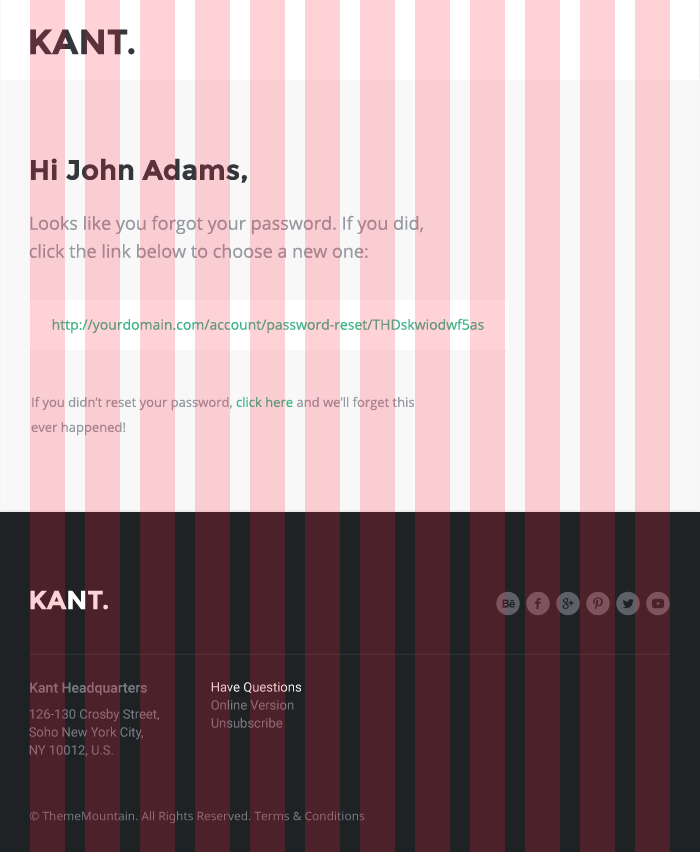
<style>
.page{position:relative;width:700px;height:852px;background:#f9cdd2}
.page>*{position:absolute;margin:0}
.t1{font:35px "Montserrat-Bold";color:#5c313a}
.t2{font:28px "Montserrat-Bold"}
.t3{font:18px/28px "OpenSans"}
.t4{font:14px "OpenSans"}
.t5{font:13px/25px "OpenSans"}
.t6{font:26px "Montserrat-Bold"}
.t7{font:14px "Roboto-Medium";color:#956a75}
.t8{font:13px/18px "Roboto-Regular"}
.t9{font:13px/18px "Roboto-Regular";color:#956a75}
.t10{font:12px "OpenSans";color:#956a75}
</style>
<div class="page">
<p class="t1" style="left:30px;top:29px;width:105px;height:26px">KANT.</p>
<p class="t2" style="left:31px;top:158px;width:216px;height:25px">Hi John Adams,</p>
<p class="t3" style="left:29px;top:215px;width:394px;height:43px">Looks like you forgot your password. If you did, <br>click the link below to choose a new one:</p>
<p class="t4" style="left:52px;top:318px;width:432px;height:16px">http://yourdomain.com/account/password-reset/THDskwiodwf5as</p>
<p class="t5" style="left:31px;top:396px;width:383px;height:40px">If you didn’t reset your password, click here and we’ll forget this ever happened!</p>
<p class="t6" style="left:30px;top:590px;width:78px;height:20px">KANT.</p>
<p class="t7" style="left:30px;top:682px;width:117px;height:14px">Kant Headquarters</p>
<p class="t8" style="left:211px;top:682px;width:90px;height:46px">Have Questions<br>Online Version<br>Unsubscribe</p>
<p class="t9" style="left:29px;top:708px;width:130px;height:49px">126-130 Crosby Street,<br>Soho New York City,<br>NY 10012, U.S.</p>
<p class="t10" style="left:29px;top:811px;width:336px;height:13px">© ThemeMountain. All Rights Reserved. Terms &amp; Conditions</p>
</div>
